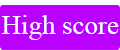
<style>
.page{position:relative;width:120px;height:50px;background:#ba00ff}
.page>*{position:absolute;margin:0}
.t1{font:27px "TimesNewRomanPSMT";color:#fefefe}
</style>
<div class="page">
<p class="t1" style="left:1px;top:15px;width:118px;height:25px">High score</p>
</div>
